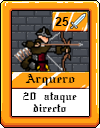
<style>
.page{position:relative;width:100px;height:128px;background:#ffa214}
.page>*{position:absolute;margin:0}
.t1{font:12px "Arial-BoldMT";color:#000000}
.t2{font:12px "SWGothe";color:#000000}
.t3{font:10px "SWGothe";color:#000000}
</style>
<div class="page">
<p class="t1" style="left:55px;top:17px;width:14px;height:9px">25</p>
<p class="t2" style="left:25px;top:74px;width:50px;height:12px">Arquero</p>
<p class="t3" style="left:23px;top:92px;width:54px;height:20px;text-align:center">20 ataque<br>directo</p>
</div>
